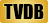
<style>
.page{position:relative;width:48px;height:23px;background:#000000}
.page>*{position:absolute;margin:0}
.t1{font:19px "Impact";color:#000000}
</style>
<div class="page">
<p class="t1" style="left:4px;top:4px;width:40px;height:15px">TVDB</p>
</div>
